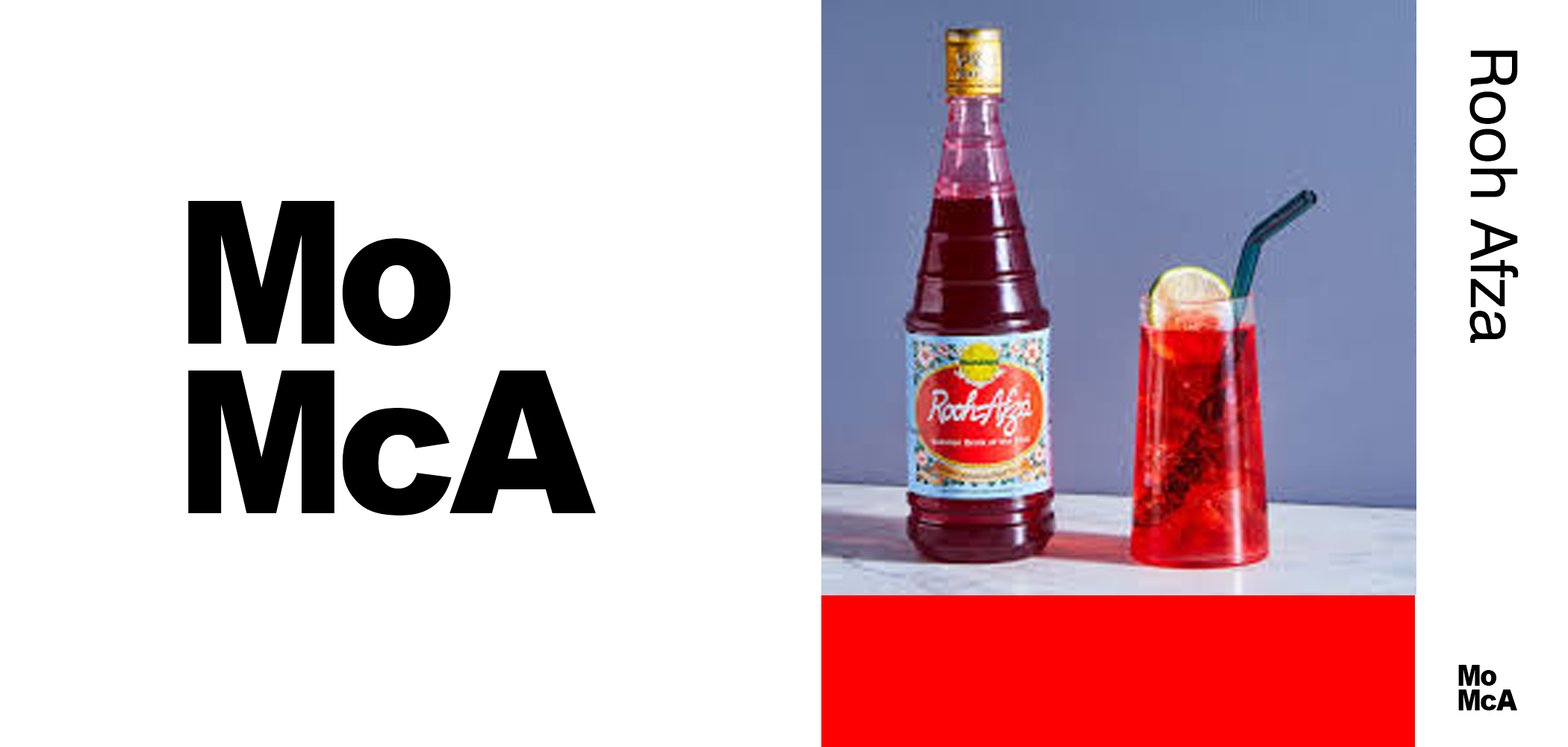
<style>
.page{position:relative;width:1568px;height:747px;background:#ffffff}
.page>*{position:absolute;margin:0}
.t1{font:64.9px "Swiss721BT-Roman";color:#000000}
.t2{font:199.5px/170px "Arial-Black";letter-spacing:-0.06em;color:#000000;scale:0.91 1}
.t3{font:199.5px/170px "Arial-Black";color:#000000;scale:0.91 1}
.t4{font:199.5px/170px "Arial-Black";letter-spacing:-0.04em;color:#000000;scale:0.91 1}
.t5{font:199.5px/170px "Arial-Black";color:#000000;scale:0.94 1}
.t6{font:29px/24.7px "Arial-Black";letter-spacing:-0.06em;color:#000000;scale:0.91 1}
.t7{font:29px/24.7px "Arial-Black";color:#000000;scale:0.91 1}
.t8{font:29px/24.7px "Arial-Black";letter-spacing:-0.04em;color:#000000;scale:0.91 1}
.t9{font:29px/24.7px "Arial-Black";color:#000000;scale:0.94 1}
</style>
<div class="page">
<p class="t1" style="left:1469px;top:50px;width:50px;height:293px;rotate:90deg">Rooh Afza</p>
<p class="t2" style="left:188px;top:201px;width:408px;height:314px">M<span class="t3">o<br></span>M<span class="t4">c</span><span class="t5">A</span></p>
<p class="t6" style="left:1458px;top:665px;width:59px;height:45px">M<span class="t7">o<br></span>M<span class="t8">c</span><span class="t9">A</span></p>
</div>
